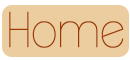
<style>
.page{position:relative;width:130px;height:60px;background:#eccd9f}
.page>*{position:absolute;margin:0}
.t1{font:49px "ClementePDaa-Hairline";color:#9d3901}
</style>
<div class="page">
<p class="t1" style="left:9px;top:11px;width:115px;height:37px">Home</p>
</div>
